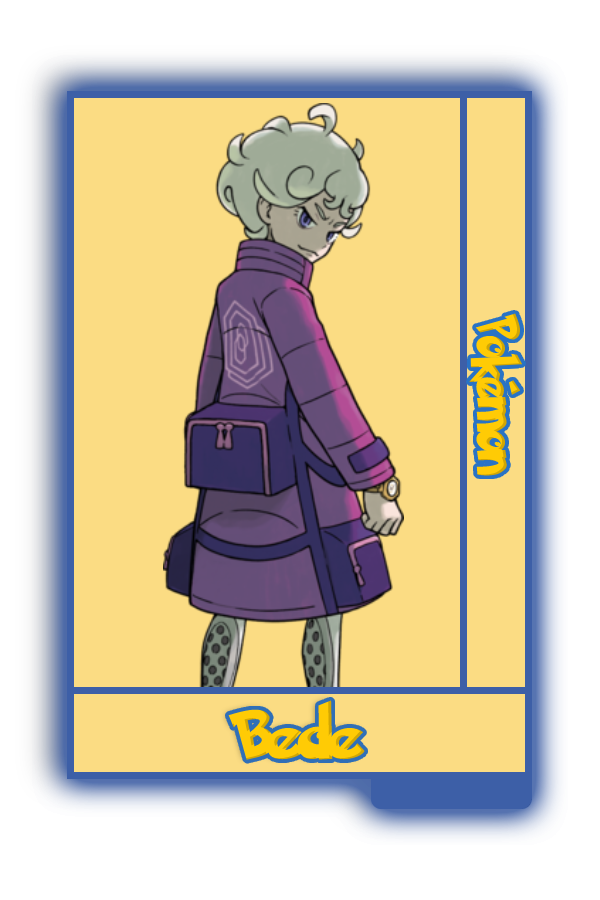
<style>
.page{position:relative;width:600px;height:900px;background:#fbdc83}
.page>*{position:absolute;margin:0}
.t1{font:48.8px "PokemonSolidNormal";color:#ffcb05;scale:0.8 1}
.t2{font:55.2px "PokemonSolidNormal";color:#ffcb05;scale:1.12 1}
</style>
<div class="page">
<p class="t1" style="left:469px;top:313px;width:54px;height:163px;rotate:90deg">Pokémon</p>
<p class="t2" style="left:228px;top:700px;width:137px;height:60px">Bede</p>
</div>
